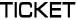
<style>
.page{position:relative;width:76px;height:20px;background:#ffffff}
.page>*{position:absolute;margin:0}
.t1{font:23px "MicrogrammaD-MediExte";letter-spacing:0.075em;color:#000000;font-weight:bold;scale:0.7 1}
</style>
<div class="page">
<p class="t1" style="left:0px;top:2px;width:76px;height:16px">TICKET</p>
</div>
